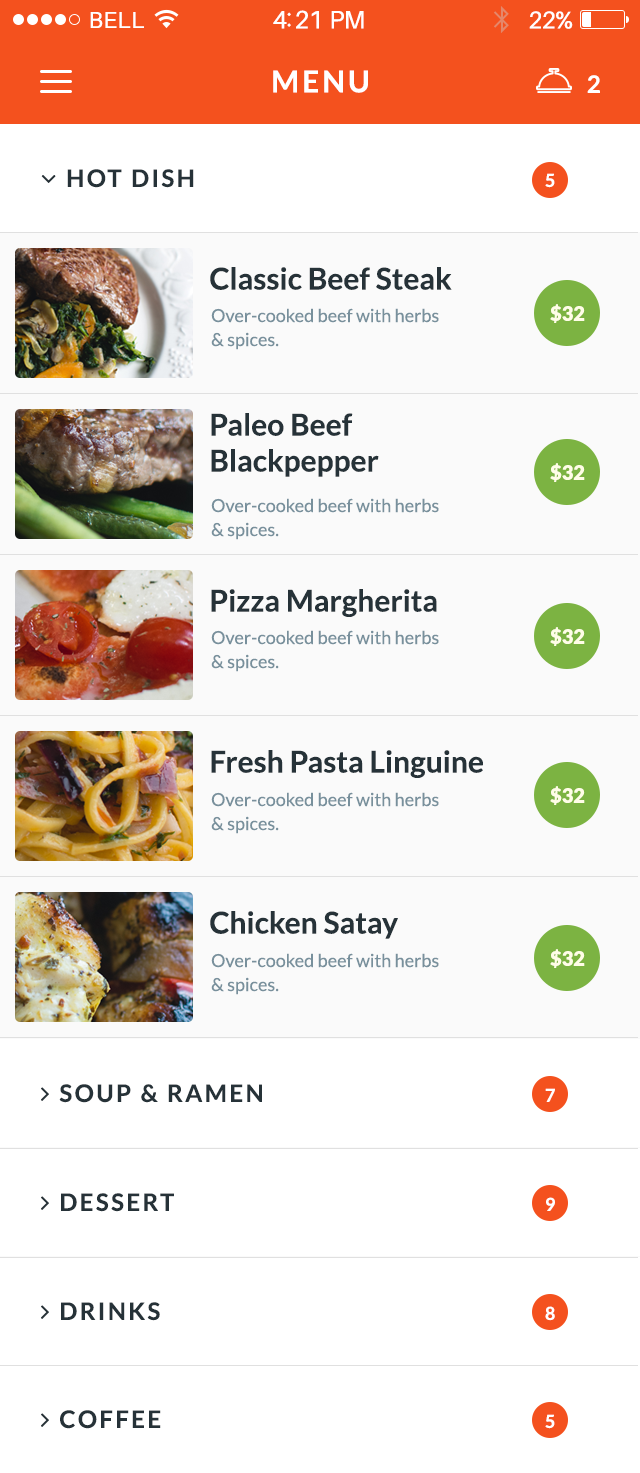
<style>
.page{position:relative;width:640px;height:1473px;background:#fafafa}
.page>*{position:absolute;margin:0}
.t1{font:23px "Aileron-Regular";letter-spacing:0.02em;color:#ffffff}
.t2{font:25px "Aileron-Regular";letter-spacing:-0.02em;color:#ffffff}
.t3{font:24px "Aileron-Regular";letter-spacing:-0.02em;color:#ffffff}
.t4{font:30px "Lato-Bold";letter-spacing:0.1em;color:#ffffff;text-transform:uppercase}
.t5{font:24px "Lato-Bold";letter-spacing:0.1em;color:#ffffff;text-transform:uppercase}
.t6{font:30px "Lato-Bold";color:#263238}
.t7{font:20px "Lato-Black";color:#fffde7}
.t8{font:18px/24px "Lato-Regular";color:#78909c}
.t9{font:30px/36px "Lato-Bold";color:#263238}
</style>
<div class="page">
<p class="t1" style="left:90px;top:12px;width:54px;height:16px">BELL</p>
<p class="t2" style="left:273px;top:10px;width:91px;height:19px">4:21 PM</p>
<p class="t3" style="left:529px;top:11px;width:44px;height:18px">22%</p>
<p class="t4" style="left:273px;top:70px;width:95px;height:23px">menu</p>
<p class="t5" style="left:587px;top:75px;width:13px;height:18px">2</p>
<p class="t6" style="left:210px;top:267px;width:242px;height:23px">Classic Beef Steak</p>
<p class="t7" style="left:550px;top:304px;width:35px;height:19px">$32</p>
<p class="t8" style="left:211px;top:308px;width:228px;height:42px">Over-cooked beef with herbs<br>&amp; spices.</p>
<p class="t9" style="left:211px;top:413px;width:168px;height:64px">Paleo Beef<br>Blackpepper</p>
<p class="t7" style="left:550px;top:463px;width:35px;height:19px">$32</p>
<p class="t8" style="left:211px;top:498px;width:228px;height:42px">Over-cooked beef with herbs<br>&amp; spices.</p>
<p class="t6" style="left:211px;top:589px;width:226px;height:28px">Pizza Margherita</p>
<p class="t8" style="left:211px;top:630px;width:228px;height:42px">Over-cooked beef with herbs<br>&amp; spices.</p>
<p class="t7" style="left:550px;top:627px;width:35px;height:19px">$32</p>
<p class="t6" style="left:211px;top:750px;width:272px;height:28px">Fresh Pasta Linguine</p>
<p class="t8" style="left:211px;top:792px;width:228px;height:42px">Over-cooked beef with herbs<br>&amp; spices.</p>
<p class="t7" style="left:550px;top:786px;width:35px;height:19px">$32</p>
<p class="t6" style="left:210px;top:911px;width:188px;height:28px">Chicken Satay</p>
<p class="t8" style="left:211px;top:953px;width:228px;height:42px">Over-cooked beef with herbs<br>&amp; spices.</p>
<p class="t7" style="left:550px;top:949px;width:35px;height:19px">$32</p>
</div>
